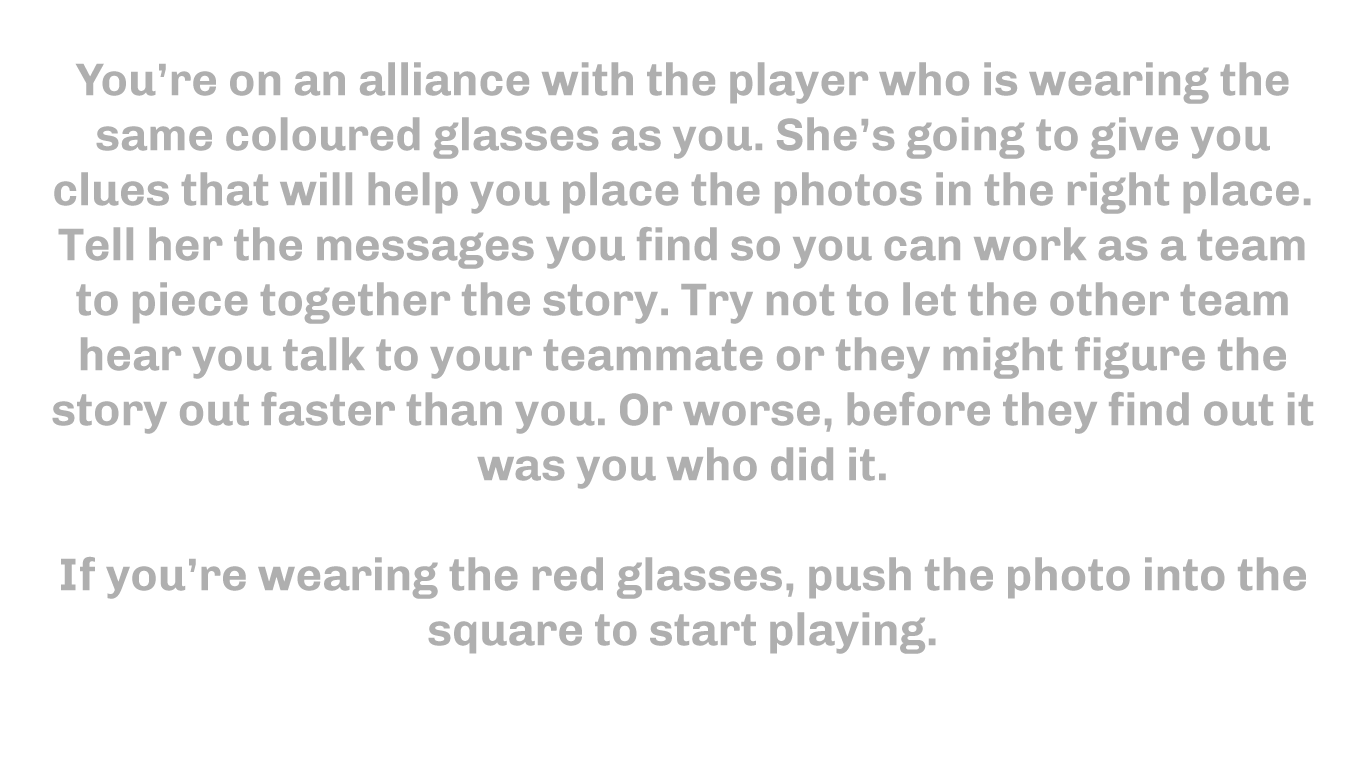
<style>
.page{position:relative;width:1366px;height:768px;background:#ffffff}
.page>*{position:absolute;margin:0}
.t1{font:45.8px "Chivo-Bold";color:#afafaf}
</style>
<div class="page">
<p class="t1" style="left:52px;top:62px;width:1262px;height:592px;text-align:center">You’re on an alliance with the player who is wearing the same coloured glasses as you. She’s going to give you clues that will help you place the photos in the right place. Tell her the messages you find so you can work as a team to piece together the story. Try not to let the other team hear you talk to your teammate or they might figure the story out faster than you. Or worse, before they find out it was you who did it. <br><br>If you’re wearing the red glasses, push the photo into the square to start playing.</p>
</div>
